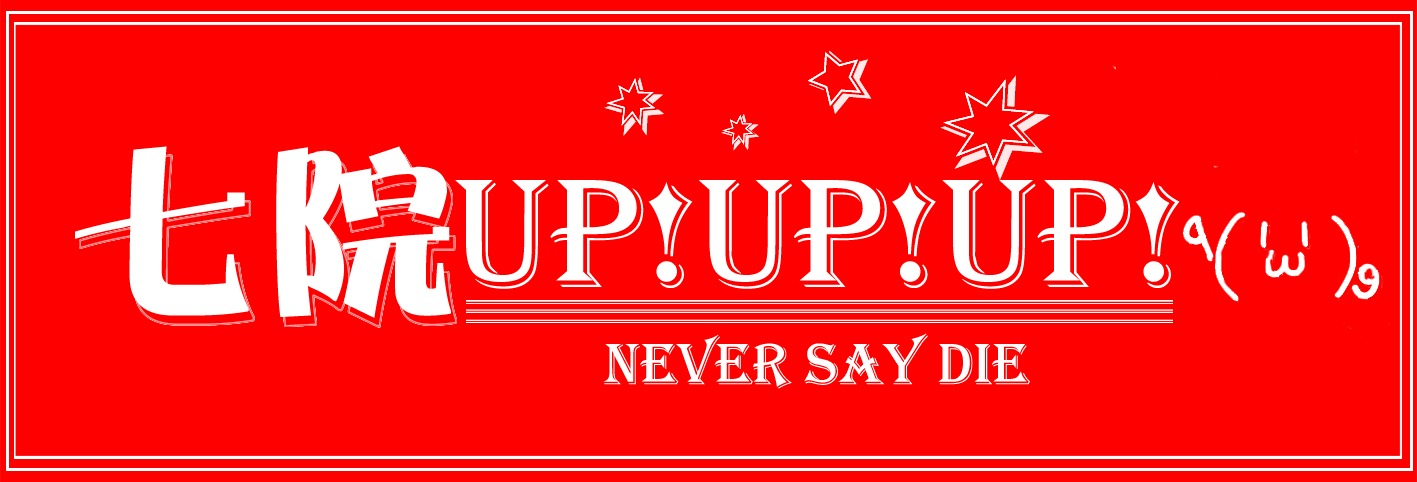
<style>
.page{position:relative;width:1417px;height:482px;background:#ff0000}
.page>*{position:absolute;margin:0}
.t1{font:200px "FZTCGHJW--GB1-0";color:#ffffff}
.t2{font:160px "Algerian";color:#ffffff}
.t3{font:60px "Algerian";color:#ffffff}
</style>
<div class="page">
<p class="t1" style="left:75px;top:146px;width:376px;height:172px">七院</p>
<p class="t2" style="left:455px;top:180px;width:725px;height:109px">UP!UP!UP!</p>
<p class="t3" style="left:603px;top:333px;width:427px;height:56px">Never say die</p>
</div>
